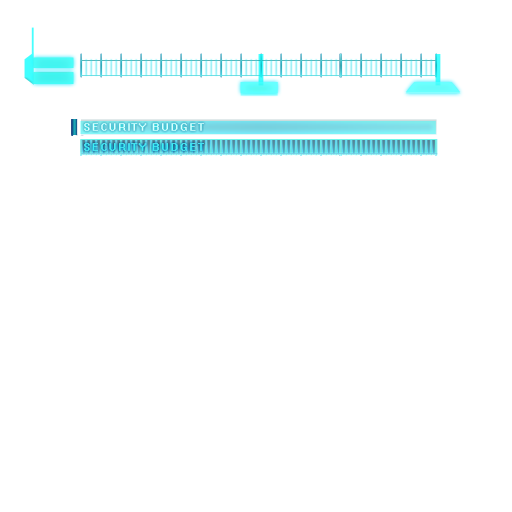
<style>
.page{position:relative;width:512px;height:512px;background:#ffffff}
.page>*{position:absolute;margin:0}
.t1{font:12px "System";color:#dbffff}
.t2{font:12px "System";color:#3af0f4}
</style>
<div class="page">
<p class="t1" style="left:84px;top:123px;width:120px;height:8px">SECURITY BUDGET</p>
<p class="t2" style="left:84px;top:143px;width:120px;height:8px">SECURITY BUDGET</p>
<p class="t2" style="left:84px;top:143px;width:120px;height:8px">SECURITY BUDGET</p>
</div>
